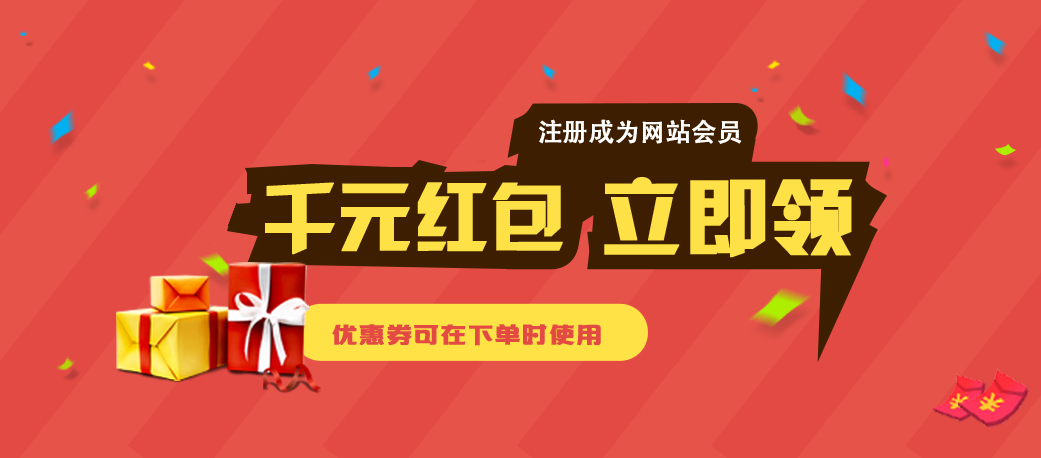
<style>
.page{position:relative;width:1041px;height:458px;background:#e34a44}
.page>*{position:absolute;margin:0}
.t1{font:25px "AdobeHeitiStd-Regular";color:#ffffff;font-weight:bold}
.t2{font:74.7px "HYk2gj";color:#fee147;font-weight:bold}
.t3{font:83.6px "HYk2gj";color:#fee147;font-weight:bold}
.t4{font:25px "HYShuYuanHeiJ";letter-spacing:0.06em;color:#e34a44;font-weight:bold}
</style>
<div class="page">
<p class="t1" style="left:539px;top:119px;width:203px;height:25px">注册成为网站会员</p>
<p class="t2" style="left:265px;top:182px;width:298px;height:73px">千元红包</p>
<p class="t3" style="left:604px;top:177px;width:249px;height:81px">立即领</p>
<p class="t4" style="left:332px;top:324px;width:269px;height:22px">优惠券可在下单时使用</p>
</div>
